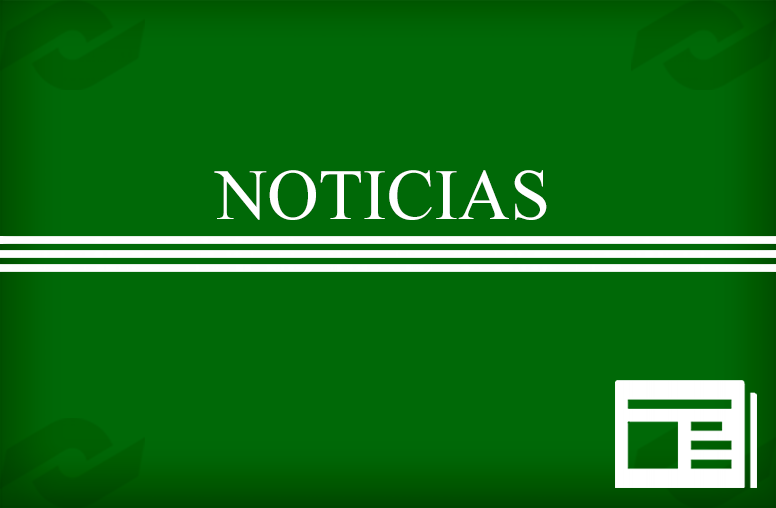
<style>
.page{position:relative;width:776px;height:508px;background:#006907}
.page>*{position:absolute;margin:0}
.t1{font:72px "TimesNewRomanPSMT";color:#ffffff}
</style>
<div class="page">
<p class="t1" style="left:214px;top:170px;width:333px;height:50px">NOTICIAS</p>
</div>
